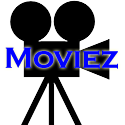
<style>
.page{position:relative;width:125px;height:125px;background:#ffffff}
.page>*{position:absolute;margin:0}
.t1{font:30px "CopperplateGothic-Bold";color:#0000ff}
</style>
<div class="page">
<p class="t1" style="left:5px;top:47px;width:113px;height:22px">Moviez</p>
</div>
